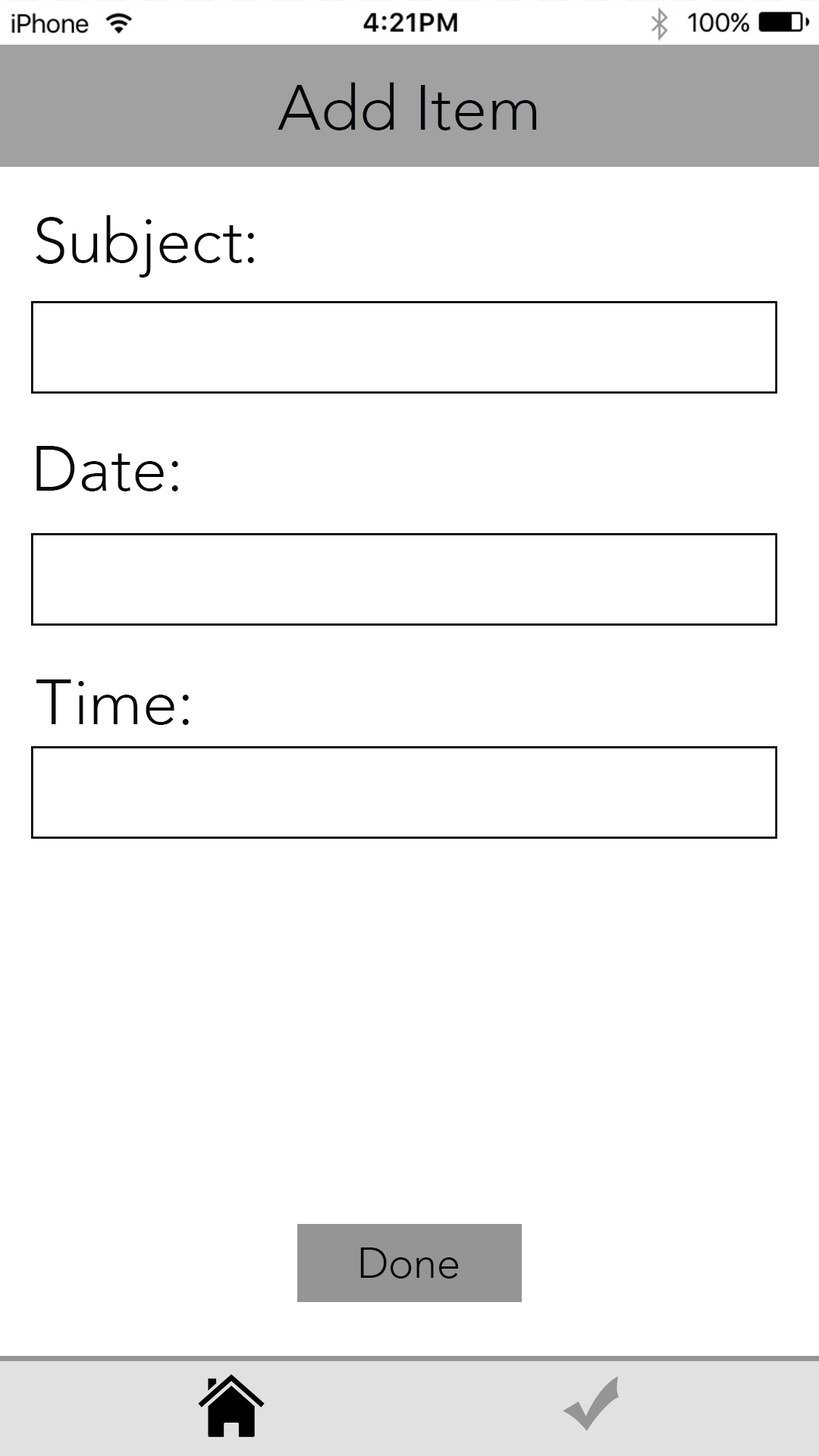
<style>
.page{position:relative;width:819px;height:1456px;background:#ffffff}
.page>*{position:absolute;margin:0}
.t1{font:63.2px "Avenir-Light";color:#060709}
.t2{font:42.1px "Avenir-Light";color:#060709}
</style>
<div class="page">
<p class="t1" style="left:278px;top:82px;width:259px;height:48px">Add Item</p>
<p class="t1" style="left:36px;top:215px;width:218px;height:63px">Subject:</p>
<p class="t1" style="left:36px;top:446px;width:142px;height:45px">Date:</p>
<p class="t1" style="left:36px;top:679px;width:153px;height:46px">Time:</p>
<p class="t2" style="left:360px;top:1247px;width:99px;height:32px">Done</p>
</div>
